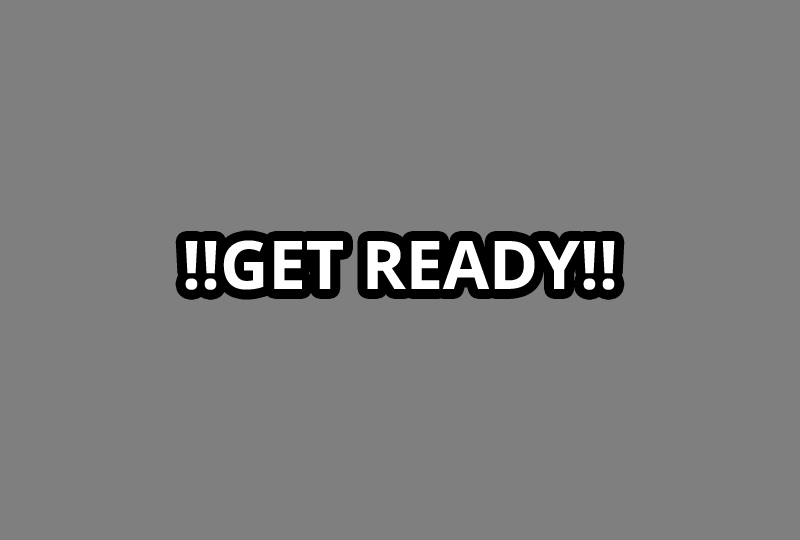
<style>
.page{position:relative;width:800px;height:540px;background:#7f7f7f}
.page>*{position:absolute;margin:0}
.t1{font:66.7px "OpenSans-Bold";color:#ffffff}
</style>
<div class="page">
<p class="t1" style="left:185px;top:240px;width:430px;height:50px">!!GET READY!!</p>
</div>
